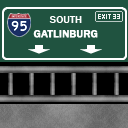
<style>
.page{position:relative;width:128px;height:128px;background:#205340}
.page>*{position:absolute;margin:0}
.t1{font:11px "FranklinGothic-Medium";color:#ffffff;font-weight:bold}
.t2{font:11px "FranklinGothic-Medium";color:#ffffff}
</style>
<div class="page">
<p class="t1" style="left:33px;top:16px;width:65px;height:22px;text-align:center"><span class="t2">SOUTH<br></span>GATLINBURG</p>
</div>
